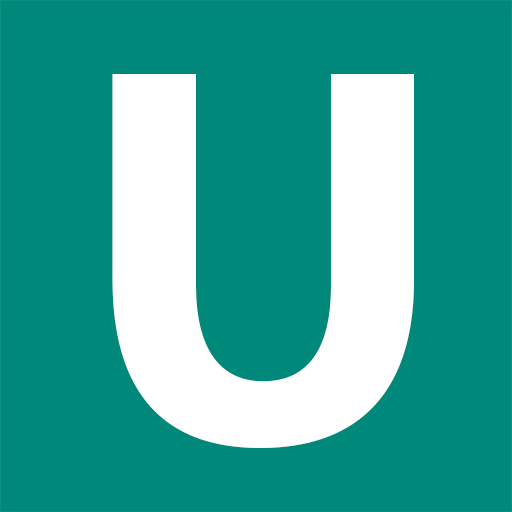
<style>
.page{position:relative;width:512px;height:512px;background:#00897b}
.page>*{position:absolute;margin:0}
.t1{font:546.7px "MyriadPro-Bold";color:#ffffff}
</style>
<div class="page">
<p class="t1" style="left:112px;top:74px;width:302px;height:374px">U</p>
</div>
